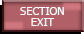
<style>
.page{position:relative;width:84px;height:34px;background:#b16067}
.page>*{position:absolute;margin:0}
.t1{font:11px/11px "Tahoma";color:#ffffff}
</style>
<div class="page">
<p class="t1" style="left:20px;top:7px;width:44px;height:19px;text-align:center">SECTION<br>EXIT</p>
</div>
